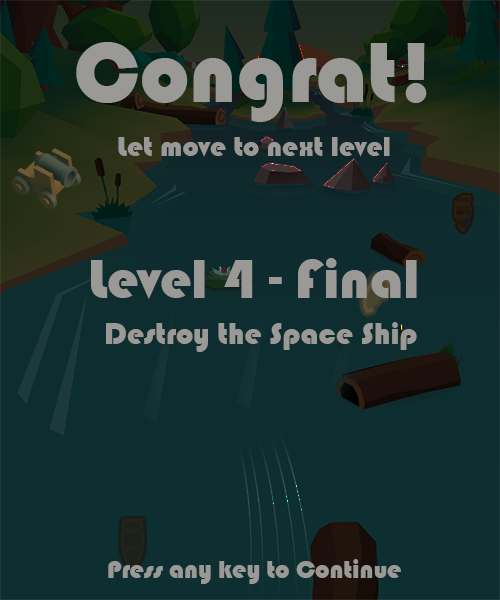
<style>
.page{position:relative;width:500px;height:600px}
.page>*{position:absolute;margin:0}
.t1{font:88.2px "Bauhaus93";color:#9a9995}
.t2{font:29.1px "Bauhaus93";color:#9a9995}
.t3{font:56.7px "Bauhaus93";color:#9a9995}
.t4{font:31.1px "Bauhaus93";color:#9a9995}
.t5{font:25.7px "Bauhaus93";color:#9a9995}
</style>
<div class="page">
<p class="t1" style="left:76px;top:42px;width:351px;height:80px">Congrat!</p>
<p class="t2" style="left:118px;top:137px;width:272px;height:20px">Let move to next level</p>
<p class="t3" style="left:91px;top:258px;width:326px;height:41px">Level 4 - Final</p>
<p class="t4" style="left:106px;top:322px;width:311px;height:30px">Destroy the Space Ship</p>
<p class="t5" style="left:108px;top:559px;width:293px;height:25px">Press any key to Continue</p>
</div>
